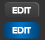
<style>
.page{position:relative;width:45px;height:40px;background:#333333}
.page>*{position:absolute;margin:0}
.t1{font:9px "Sansation-Bold";letter-spacing:-0.05em;color:#ffffff;font-weight:bold}
</style>
<div class="page">
<p class="t1" style="left:12px;top:7px;width:20px;height:7px">EDIT</p>
<p class="t1" style="left:12px;top:27px;width:20px;height:7px">EDIT</p>
</div>
